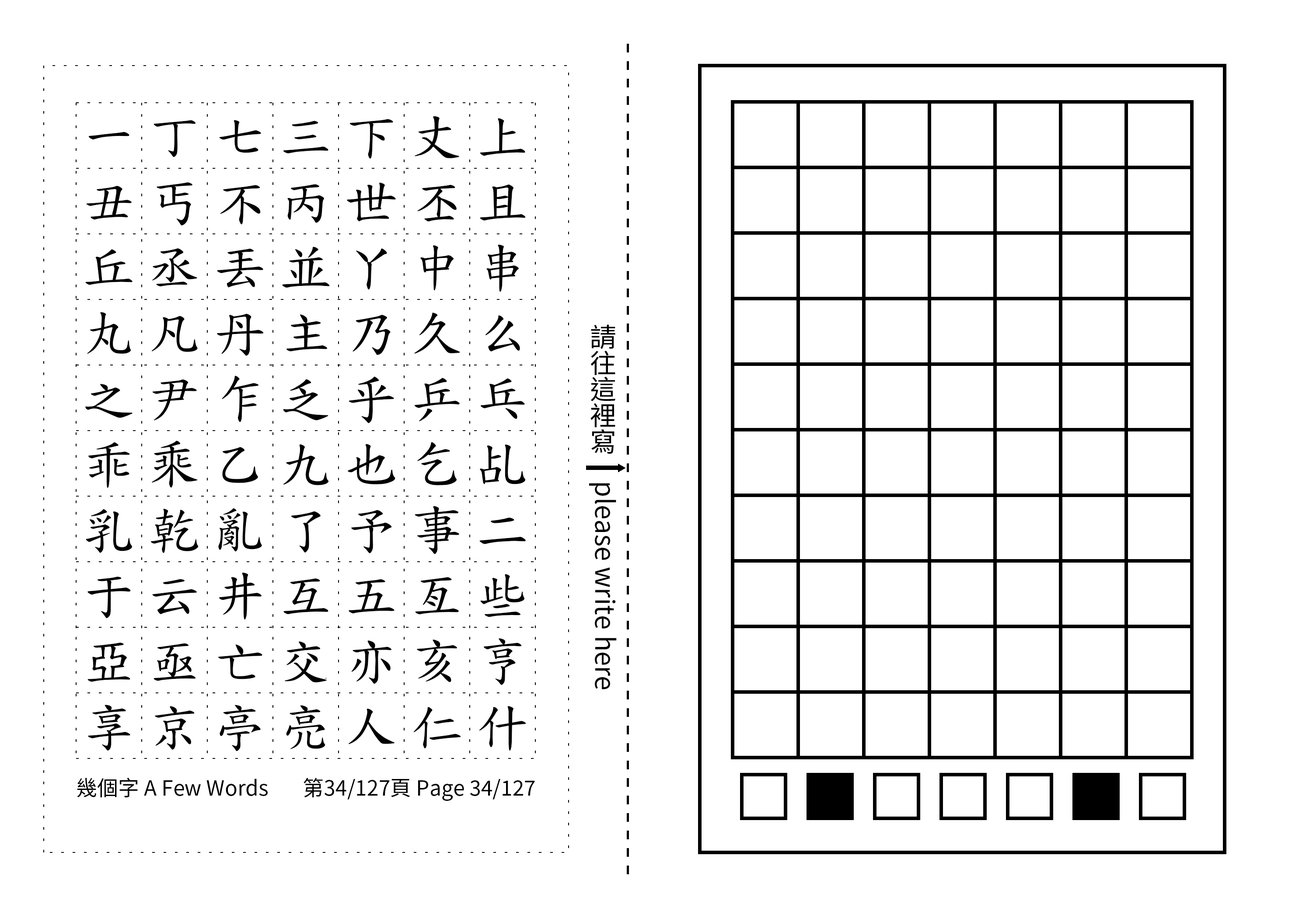
<style>
.page{position:relative;width:1299px;height:918px;background:#ffffff}
.page>*{position:absolute;margin:0}
.t1{font:52.5px/65.6px "TW-Kai-98_1";letter-spacing:0.25em;color:#000000}
.t2{font:26.2px "SourceHanSansTC-Regular";color:#000000}
.t3{font:21px "SourceHanSansTC-Regular";color:#000000}
</style>
<div class="page">
<p class="t1" style="left:85px;top:116px;width:441px;height:636px;text-align:center">一丁七三下丈上丑丐不丙世丕且丘丞丟並丫中串丸凡丹主乃久么之尹乍乏乎乒乓乖乘乙九也乞乩乳乾亂了予事二于云井互五亙些亞亟亡交亦亥亨享京亭亮人仁什</p>
<p class="t2" style="left:589px;top:324px;width:28px;height:366px;text-align:center">請往這裡寫　please write here</p>
<p class="t3" style="left:77px;top:778px;width:191px;height:20px">幾個字 A Few Words</p>
<p class="t3" style="left:303px;top:778px;width:232px;height:23px">第34/127頁 Page 34/127</p>
</div>
